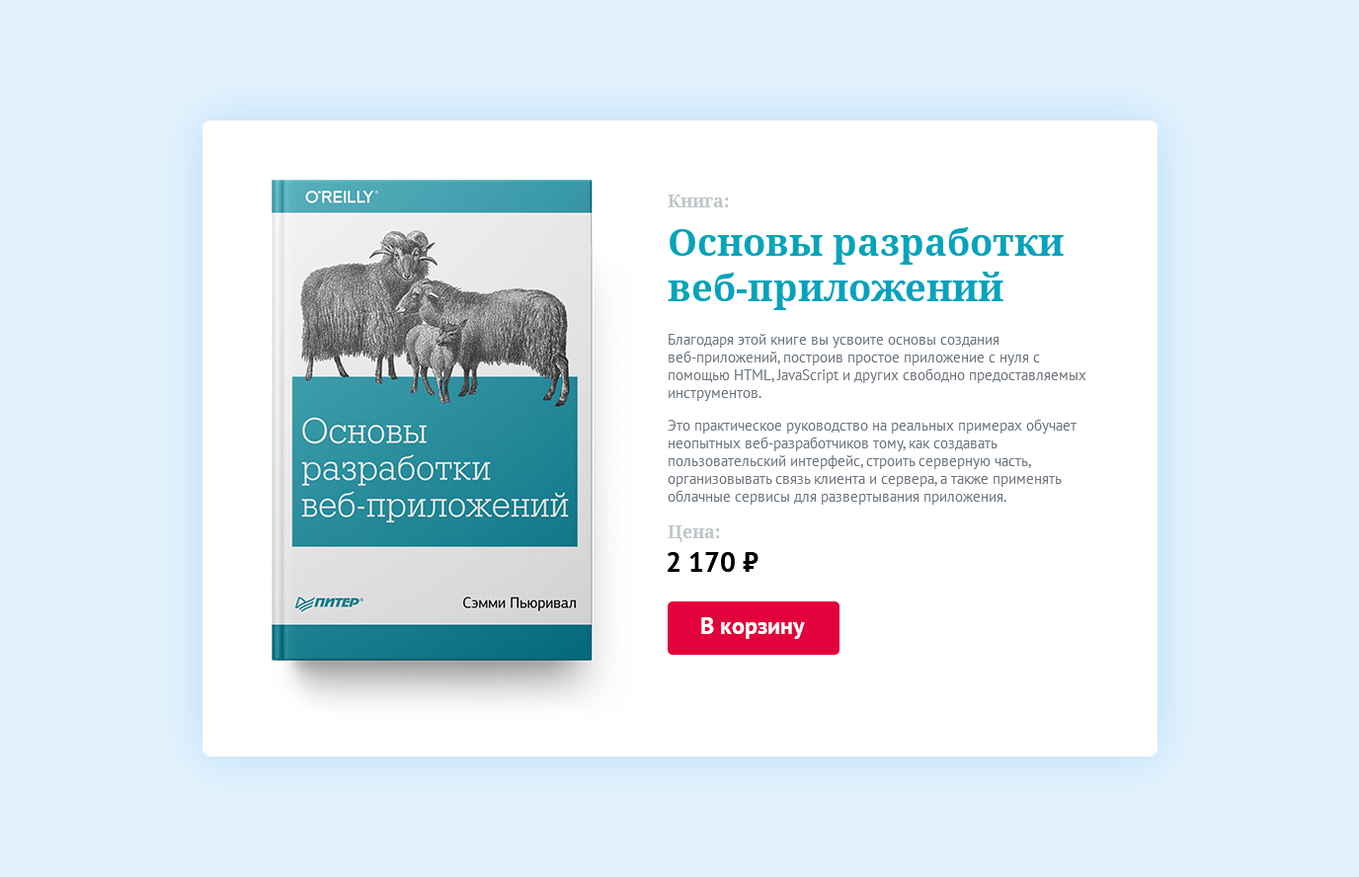
<style>
.page{position:relative;width:1359px;height:877px;background:#e3f2fd}
.page>*{position:absolute;margin:0}
.t1{font:17.8px "NotoSerif-Bold";color:#bfc5c8}
.t2{font:37.5px "NotoSerif-Bold";color:#01a4bd}
.t3{font:14.8px "PTSans-Regular";color:#6c757f}
.t4{font:27.7px "PTSans-Bold";color:#000000}
.t5{font:23.7px "PTSans-Bold";color:#ffffff}
</style>
<div class="page">
<p class="t1" style="left:668px;top:195px;width:61px;height:12px">Книга:</p>
<p class="t2" style="left:668px;top:227px;width:396px;height:83px">Основы разработки веб-приложений</p>
<p class="t3" style="left:668px;top:334px;width:419px;height:171px">Благодаря этой книге вы усвоите основы создания веб-приложений, построив простое приложение с нуля с помощью HTML, JavaScript и других свободно предоставляемых инструментов. <br>Это практическое руководство на реальных примерах обучает неопытных веб-разработчиков тому, как создавать пользовательский интерфейс, строить серверную часть, организовывать связь клиента и сервера, а также применять облачные сервисы для развертывания приложения.</p>
<p class="t1" style="left:668px;top:526px;width:52px;height:16px">Цена:</p>
<p class="t4" style="left:668px;top:552px;width:91px;height:20px">2 170 ₽</p>
<p class="t5" style="left:701px;top:617px;width:104px;height:22px">В корзину</p>
</div>
